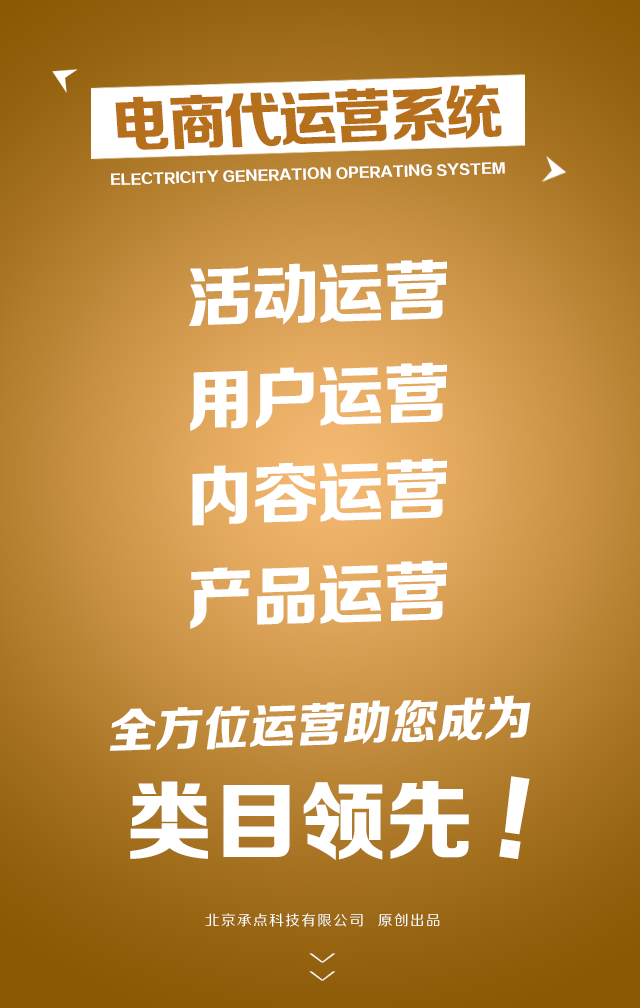
<style>
.page{position:relative;width:640px;height:1008px}
.page>*{position:absolute;margin:0}
.t1{font:60.1px "FZZDHJW--GB1-0";letter-spacing:-0.05em;color:#b6701b;text-transform:uppercase;scale:0.97 1}
.t2{font:13.4px "FZZDHJW--GB1-0";letter-spacing:0.005em;color:#ffffff;text-transform:uppercase}
.t3{font:66.5px "FZZDHJW--GB1-0";letter-spacing:-0.025em;color:#ffffff;text-transform:uppercase}
.t4{font:47.9px "FZZDHJW--GB1-0";letter-spacing:0.005em;color:#ffffff;text-transform:uppercase}
.t5{font:86.5px "FZZDHJW--GB1-0";letter-spacing:0.005em;color:#ffffff;text-transform:uppercase}
.t6{font:96.1px "FZZDHJW--GB1-0";letter-spacing:0.005em;color:#ffffff;text-transform:uppercase}
.t7{font:14.2px "FZZHJW--GB1-0";letter-spacing:0.1em;color:#ffffff;text-transform:uppercase}
.t8{font:36.8px "FZZXHJW--GB1-0";letter-spacing:0.5em;color:#ffffff;text-transform:uppercase;scale:0.44 1}
</style>
<div class="page">
<p class="t1" style="left:115px;top:84px;width:387px;height:66px;rotate:-2deg">电商代运营系统</p>
<p class="t2" style="left:111px;top:162px;width:394px;height:23px;rotate:-2deg">Electricity generation operating system</p>
<p class="t3" style="left:189px;top:259px;width:258px;height:67px;rotate:-2deg">活动运营</p>
<p class="t3" style="left:190px;top:362px;width:257px;height:69px;rotate:-2deg">用户运营</p>
<p class="t3" style="left:192px;top:458px;width:255px;height:68px;rotate:-2deg">内容运营</p>
<p class="t3" style="left:190px;top:560px;width:257px;height:69px;rotate:-2deg">产品运营</p>
<p class="t4" style="left:110px;top:695px;width:421px;height:56px;rotate:-2deg">全方位运营助您成为</p>
<p class="t5" style="left:130px;top:781px;width:339px;height:79px">类目领先</p>
<p class="t6" style="left:499px;top:776px;width:31px;height:83px;rotate:8deg">!</p>
<p class="t7" style="left:205px;top:913px;width:235px;height:14px">北京承点科技有限公司  原创出品</p>
<p class="t8" style="left:309px;top:953px;width:27px;height:28px;rotate:90deg">&gt;&gt;</p>
</div>
